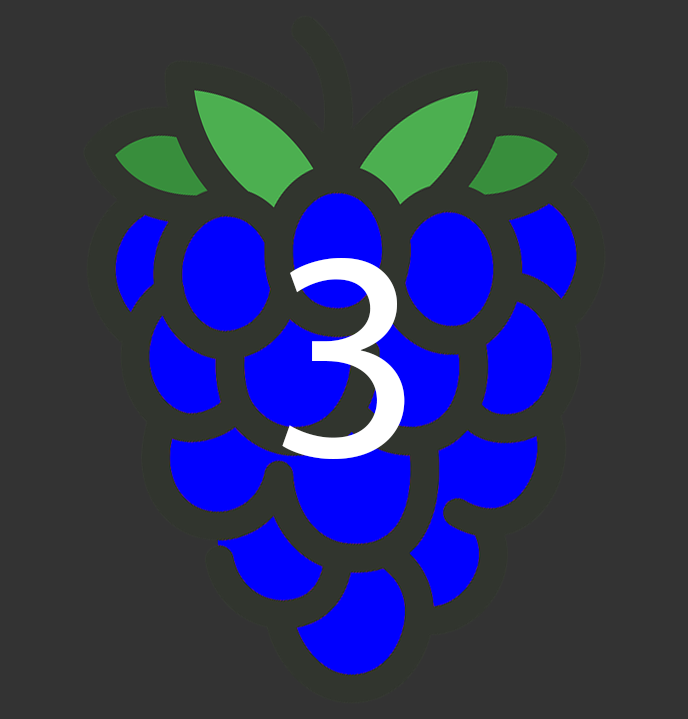
<style>
.page{position:relative;width:688px;height:719px;background:#333333}
.page>*{position:absolute;margin:0}
.t1{font:300px "MyriadPro-Regular";color:#ffffff}
</style>
<div class="page">
<p class="t1" style="left:282px;top:258px;width:123px;height:201px">3</p>
</div>
